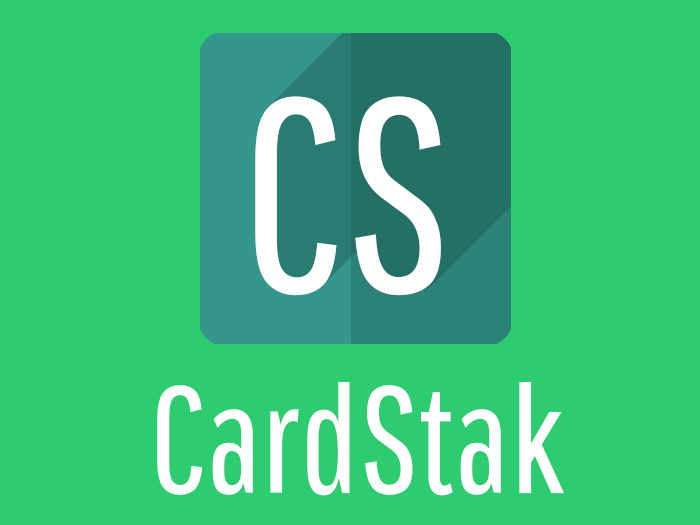
<style>
.page{position:relative;width:700px;height:525px;background:#2ecc71}
.page>*{position:absolute;margin:0}
.t1{font:150px "PathwayGothicOne-Book";color:#ffffff}
</style>
<div class="page">
<p class="t1" style="left:157px;top:382px;width:407px;height:114px">CardStak</p>
</div>
